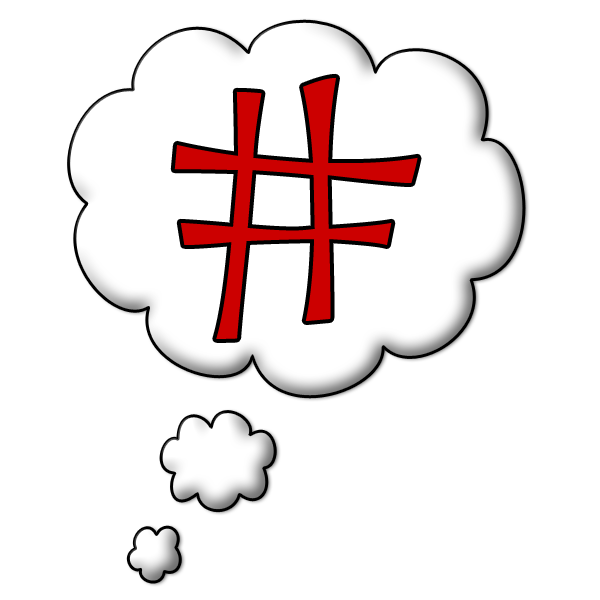
<style>
.page{position:relative;width:600px;height:600px;background:#ffffff}
.page>*{position:absolute;margin:0}
.t1{font:555px "CurlzMT";letter-spacing:-0.025em;color:#cc0000}
</style>
<div class="page">
<p class="t1" style="left:174px;top:77px;width:244px;height:262px">#</p>
</div>
